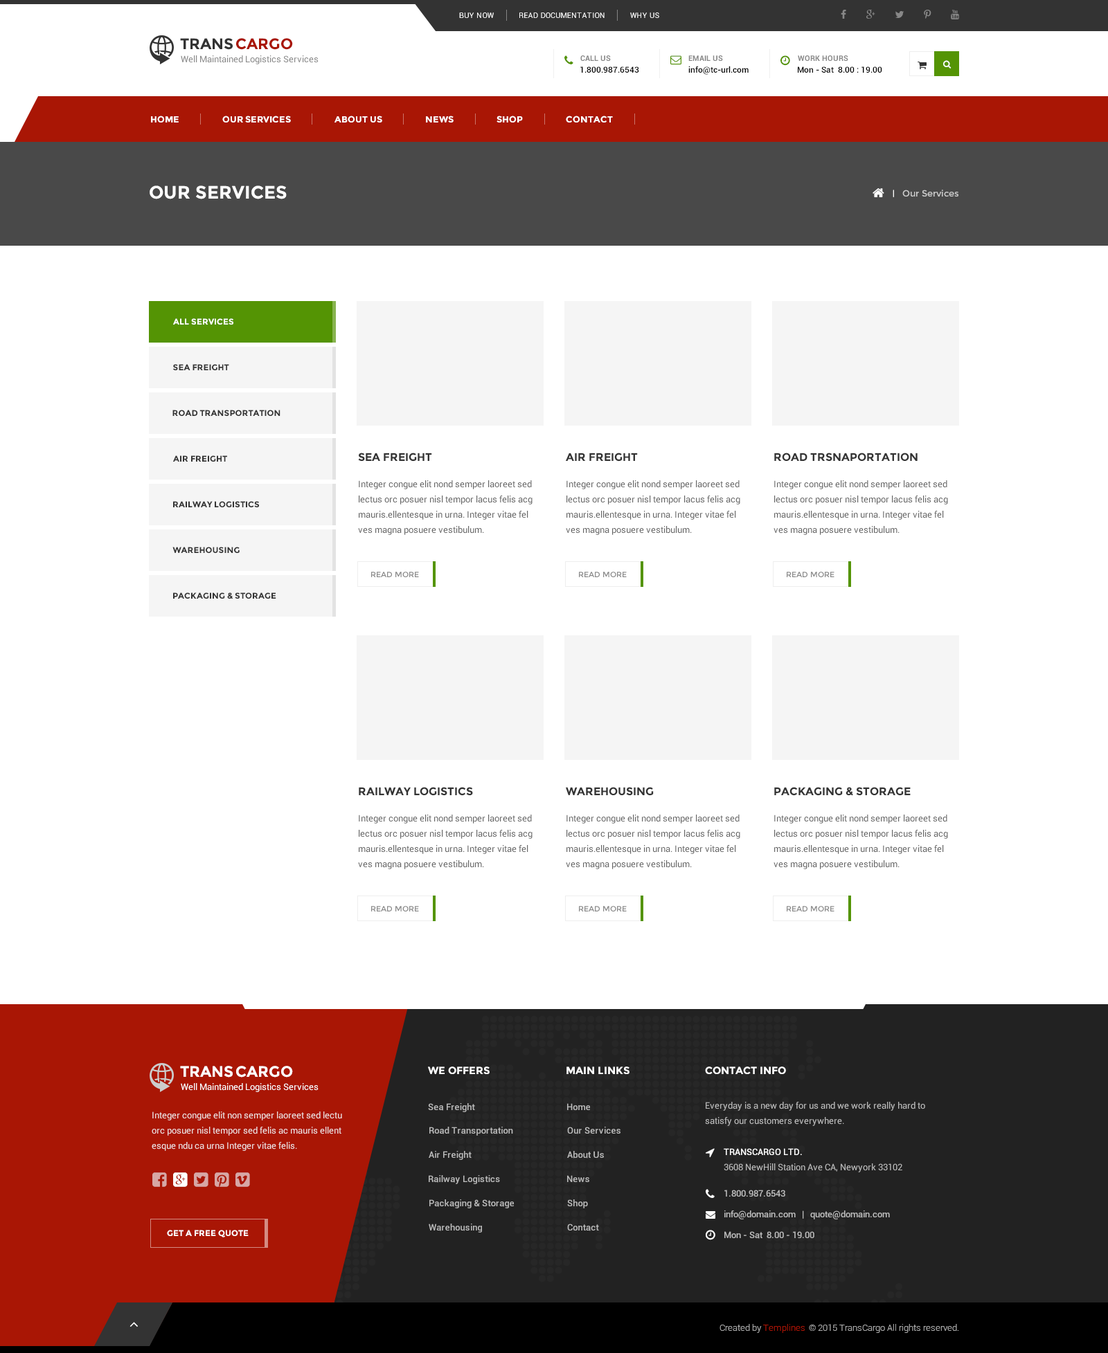
<style>
.page{position:relative;width:1108px;height:1353px;background:#ffffff}
.page>*{position:absolute;margin:0}
.t1{font:7.6px "Roboto-Regular";letter-spacing:0.025em;color:#ffffff}
.t2{font:7.6px "Roboto-Regular";letter-spacing:0.025em;color:#ffffff;text-transform:uppercase}
.t3{font:15.2px "Montserrat-Bold";color:#333333}
.t4{font:15.2px "Montserrat-Bold";color:#a91605}
.t5{font:9px "Roboto-Regular";color:#888888}
.t6{font:7.6px "Roboto-Bold";color:#888888}
.t7{font:7.6px "Roboto-Bold";color:#878787}
.t8{font:8.3px "Roboto-Medium";color:#000000}
.t9{font:9px "Montserrat-Bold";color:#ffffff}
.t10{font:18px "Montserrat-Bold";color:#ffffff;text-transform:uppercase}
.t11{font:8.3px "Roboto-Medium";color:#ffffff}
.t12{font:9px "Montserrat-Regular";color:#cccccc}
.t13{font:8.3px "Montserrat-Bold";color:#ffffff;text-transform:uppercase}
.t14{font:8.3px "Montserrat-Bold";color:#333333;text-transform:uppercase}
.t15{font:11.1px "Montserrat-Bold";color:#333333;text-transform:uppercase}
.t16{font:9px/15.2px "Roboto-Regular";color:#666666}
.t17{font:7.6px "Montserrat-Regular";color:#888888}
.t18{font:15.2px "Montserrat-Bold";color:#ffffff}
.t19{font:10.4px "Montserrat-Bold";color:#ffffff}
.t20{font:9px "Roboto-Regular";color:#ffffff}
.t21{font:9px "Roboto-Medium";letter-spacing:0.02em;color:#bababa}
.t22{font:9px "Roboto-Medium";letter-spacing:0.02em;color:#bbbbbb}
.t23{font:9px/15.2px "Roboto-Regular";color:#bababa}
.t24{font:9px/15.2px "Roboto-Regular";color:#efdedd}
.t25{font:9px/15.2px "Roboto-Medium";color:#ffffff}
.t26{font:9px "Roboto-Medium";color:#bababa}
.t27{font:8.3px "Montserrat-Bold";color:#ffffff}
.t28{font:9px "Roboto-Light";color:#aaaaaa}
.t29{font:9px "Roboto-Light";color:#a91605}
</style>
<div class="page">
<p class="t1" style="left:459px;top:12px;width:35px;height:6px">BUY NOW</p>
<p class="t2" style="left:519px;top:12px;width:85px;height:6px">read documentation</p>
<p class="t1" style="left:630px;top:12px;width:29px;height:6px">WHY US</p>
<p class="t3" style="left:180px;top:38px;width:53px;height:12px">TRANS</p>
<p class="t4" style="left:236px;top:38px;width:57px;height:12px">CARGO</p>
<p class="t5" style="left:181px;top:55px;width:137px;height:9px">Well Maintained Logistics Services</p>
<p class="t6" style="left:580px;top:55px;width:31px;height:6px">CALL US</p>
<p class="t7" style="left:688px;top:55px;width:35px;height:6px">EMAIL US</p>
<p class="t8" style="left:688px;top:66px;width:60px;height:9px">info@tc-url.com</p>
<p class="t7" style="left:798px;top:55px;width:50px;height:6px">WORK HOURS</p>
<p class="t8" style="left:580px;top:66px;width:59px;height:7px">1.800.987.6543</p>
<p class="t8" style="left:798px;top:66px;width:84px;height:7px">Mon - Sat  8.00 : 19.00</p>
<p class="t9" style="left:151px;top:116px;width:28px;height:7px">HOME</p>
<p class="t9" style="left:222px;top:116px;width:69px;height:7px">OUR SERVICES</p>
<p class="t9" style="left:334px;top:116px;width:48px;height:7px">ABOUT US</p>
<p class="t9" style="left:426px;top:116px;width:27px;height:7px">NEWS</p>
<p class="t9" style="left:496px;top:116px;width:27px;height:7px">SHOP</p>
<p class="t9" style="left:566px;top:116px;width:47px;height:7px">CONTACT</p>
<p class="t10" style="left:150px;top:186px;width:137px;height:13px">our services</p>
<p class="t11" style="left:892px;top:190px;width:2px;height:7px">|</p>
<p class="t12" style="left:902px;top:190px;width:56px;height:7px">Our Services</p>
<p class="t13" style="left:173px;top:318px;width:60px;height:7px">All services</p>
<p class="t14" style="left:173px;top:364px;width:56px;height:6px">SEA FREIGHT</p>
<p class="t14" style="left:172px;top:410px;width:108px;height:6px">Road transportation</p>
<p class="t14" style="left:173px;top:456px;width:54px;height:6px">AIR FREIGHT</p>
<p class="t15" style="left:358px;top:453px;width:74px;height:9px">SEA FREIGHT</p>
<p class="t15" style="left:566px;top:453px;width:72px;height:9px">air FREIGHT</p>
<p class="t15" style="left:774px;top:453px;width:143px;height:9px">road trsnaportation</p>
<p class="t16" style="left:358px;top:480px;width:174px;height:55px">Integer congue elit nond semper laoreet sed lectus orc posuer nisl tempor lacus felis acg mauris.ellentesque in urna. Integer vitae fel<br>ves magna posuere vestibulum. <br>Nam rutrum congue diam. Aliquam malesuada mauris et metus.</p>
<p class="t16" style="left:566px;top:480px;width:174px;height:55px">Integer congue elit nond semper laoreet sed lectus orc posuer nisl tempor lacus felis acg mauris.ellentesque in urna. Integer vitae fel<br>ves magna posuere vestibulum. <br>Nam rutrum congue diam. Aliquam malesuada mauris et metus.</p>
<p class="t16" style="left:773px;top:480px;width:175px;height:55px">Integer congue elit nond semper laoreet sed lectus orc posuer nisl tempor lacus felis acg mauris.ellentesque in urna. Integer vitae fel<br>ves magna posuere vestibulum. <br>Nam rutrum congue diam. Aliquam malesuada mauris et metus.</p>
<p class="t14" style="left:173px;top:501px;width:86px;height:6px">Railway logistics</p>
<p class="t14" style="left:172px;top:547px;width:68px;height:6px">warehousing</p>
<p class="t17" style="left:371px;top:572px;width:48px;height:5px">READ MORE</p>
<p class="t17" style="left:579px;top:572px;width:48px;height:5px">READ MORE</p>
<p class="t17" style="left:786px;top:572px;width:48px;height:5px">READ MORE</p>
<p class="t14" style="left:173px;top:593px;width:103px;height:7px">packaging &amp; storage</p>
<p class="t15" style="left:359px;top:787px;width:114px;height:9px">railway logistics</p>
<p class="t15" style="left:566px;top:787px;width:88px;height:9px">warehousing</p>
<p class="t15" style="left:774px;top:787px;width:136px;height:9px">packaging &amp; storage</p>
<p class="t16" style="left:358px;top:815px;width:174px;height:55px">Integer congue elit nond semper laoreet sed lectus orc posuer nisl tempor lacus felis acg mauris.ellentesque in urna. Integer vitae fel<br>ves magna posuere vestibulum. <br>Nam rutrum congue diam. Aliquam malesuada mauris et metus.</p>
<p class="t16" style="left:566px;top:815px;width:174px;height:55px">Integer congue elit nond semper laoreet sed lectus orc posuer nisl tempor lacus felis acg mauris.ellentesque in urna. Integer vitae fel<br>ves magna posuere vestibulum. <br>Nam rutrum congue diam. Aliquam malesuada mauris et metus.</p>
<p class="t16" style="left:773px;top:815px;width:175px;height:55px">Integer congue elit nond semper laoreet sed lectus orc posuer nisl tempor lacus felis acg mauris.ellentesque in urna. Integer vitae fel<br>ves magna posuere vestibulum. <br>Nam rutrum congue diam. Aliquam malesuada mauris et metus.</p>
<p class="t17" style="left:371px;top:906px;width:48px;height:6px">READ MORE</p>
<p class="t17" style="left:579px;top:906px;width:48px;height:6px">READ MORE</p>
<p class="t17" style="left:786px;top:906px;width:48px;height:6px">READ MORE</p>
<p class="t18" style="left:180px;top:1066px;width:53px;height:12px">TRANS</p>
<p class="t18" style="left:236px;top:1066px;width:57px;height:12px">CARGO</p>
<p class="t19" style="left:428px;top:1067px;width:61px;height:7px">WE OFFERS</p>
<p class="t19" style="left:566px;top:1067px;width:63px;height:7px">MAIN LINKS</p>
<p class="t19" style="left:705px;top:1067px;width:81px;height:7px">CONTACT INFO</p>
<p class="t20" style="left:181px;top:1083px;width:137px;height:9px">Well Maintained Logistics Services</p>
<p class="t21" style="left:428px;top:1104px;width:47px;height:9px">Sea Freight</p>
<p class="t22" style="left:567px;top:1104px;width:23px;height:6px">Home</p>
<p class="t23" style="left:705px;top:1102px;width:220px;height:24px">Everyday is a new day for us and we work really hard to<br>satisfy our customers everywhere.</p>
<p class="t24" style="left:152px;top:1112px;width:190px;height:39px">Integer congue elit non semper laoreet sed lectu<br>orc posuer nisl tempor sed felis ac mauris ellent<br>esque ndu ca urna Integer vitae felis.</p>
<p class="t21" style="left:429px;top:1127px;width:84px;height:9px">Road Transportation</p>
<p class="t22" style="left:567px;top:1127px;width:53px;height:8px">Our Services</p>
<p class="t21" style="left:429px;top:1151px;width:42px;height:9px">Air Freight</p>
<p class="t22" style="left:567px;top:1151px;width:37px;height:8px">About Us</p>
<p class="t23" style="left:723px;top:1149px;width:179px;height:24px"><span class="t25">TRANSCARGO LTD.<br></span>3608 NewHill Station Ave CA, Newyork 33102</p>
<p class="t21" style="left:429px;top:1176px;width:71px;height:9px">Railway Logistics</p>
<p class="t22" style="left:567px;top:1176px;width:22px;height:6px">News</p>
<p class="t26" style="left:724px;top:1190px;width:61px;height:7px">1.800.987.6543</p>
<p class="t21" style="left:429px;top:1200px;width:85px;height:9px">Packaging &amp; Storage</p>
<p class="t22" style="left:567px;top:1200px;width:21px;height:9px">Shop</p>
<p class="t26" style="left:724px;top:1211px;width:166px;height:9px">info@domain.com   |   quote@domain.com</p>
<p class="t21" style="left:429px;top:1224px;width:53px;height:9px">Warehousing</p>
<p class="t22" style="left:567px;top:1224px;width:32px;height:8px">Contact</p>
<p class="t27" style="left:167px;top:1230px;width:82px;height:8px">GET A FREE QUOTE</p>
<p class="t26" style="left:724px;top:1232px;width:90px;height:7px">Mon - Sat  8.00 - 19.00</p>
<p class="t28" style="left:719px;top:1324px;width:85px;height:9px">Created by <span class="t29">Templines</span></p>
<p class="t28" style="left:809px;top:1324px;width:150px;height:9px">© 2015 TransCargo All rights reserved.</p>
</div>
